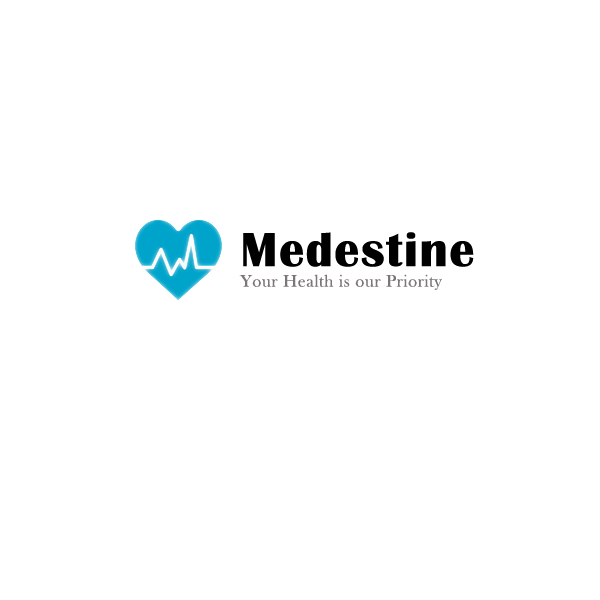
<style>
.page{position:relative;width:600px;height:600px;background:#ffffff}
.page>*{position:absolute;margin:0}
.t1{font:49.4px "BritannicBold";letter-spacing:0.03em;color:#000000}
.t2{font:17.3px "BaskOldFace";letter-spacing:0.03em;color:#7c7676}
</style>
<div class="page">
<p class="t1" style="left:243px;top:232px;width:231px;height:35px">Medestine</p>
<p class="t2" style="left:239px;top:274px;width:203px;height:16px">Your Health is our Priority</p>
</div>
